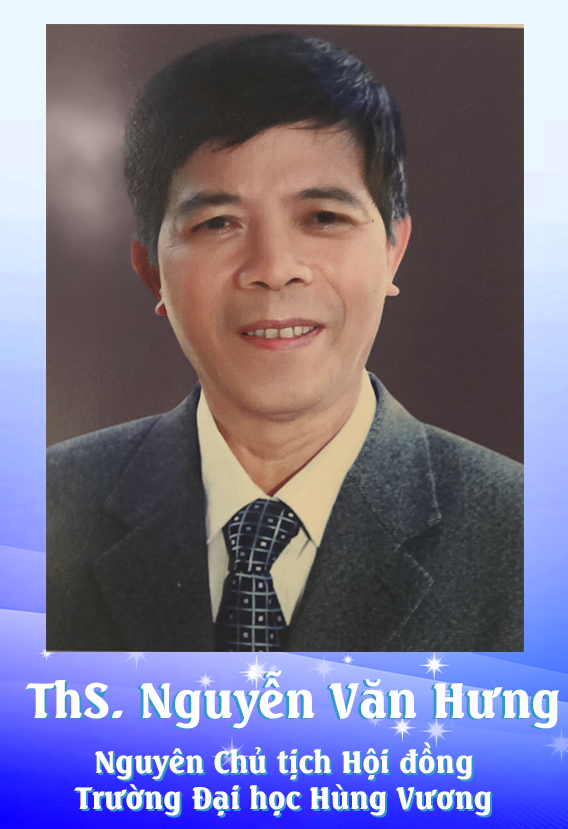
<style>
.page{position:relative;width:568px;height:829px}
.page>*{position:absolute;margin:0}
.t1{font:48px "UTMSeagullBold";color:#ffffff}
.t2{font:48px "UTMSeagullBold"}
.t3{font:30px "UTMSeagullBold";color:#ffffff}
.t4{font:30px "UTMSeagullBold"}
</style>
<div class="page">
<p class="t1" style="left:25px;top:670px;width:535px;height:59px">ThS. Nguyễn Văn Hưng</p>
<p class="t2" style="left:27px;top:671px;width:530px;height:59px">Ths. Nguyễn Văn Hưng</p>
<p class="t3" style="left:74px;top:742px;width:417px;height:74px;text-align:center">Nguyên Chủ tịch Hội đồng<br>Trường Đại học Hùng Vương</p>
<p class="t4" style="left:76px;top:744px;width:417px;height:74px;text-align:center">Nguyên Chủ tịch Hội đồng<br>Trường Đại học Hùng Vương</p>
</div>
